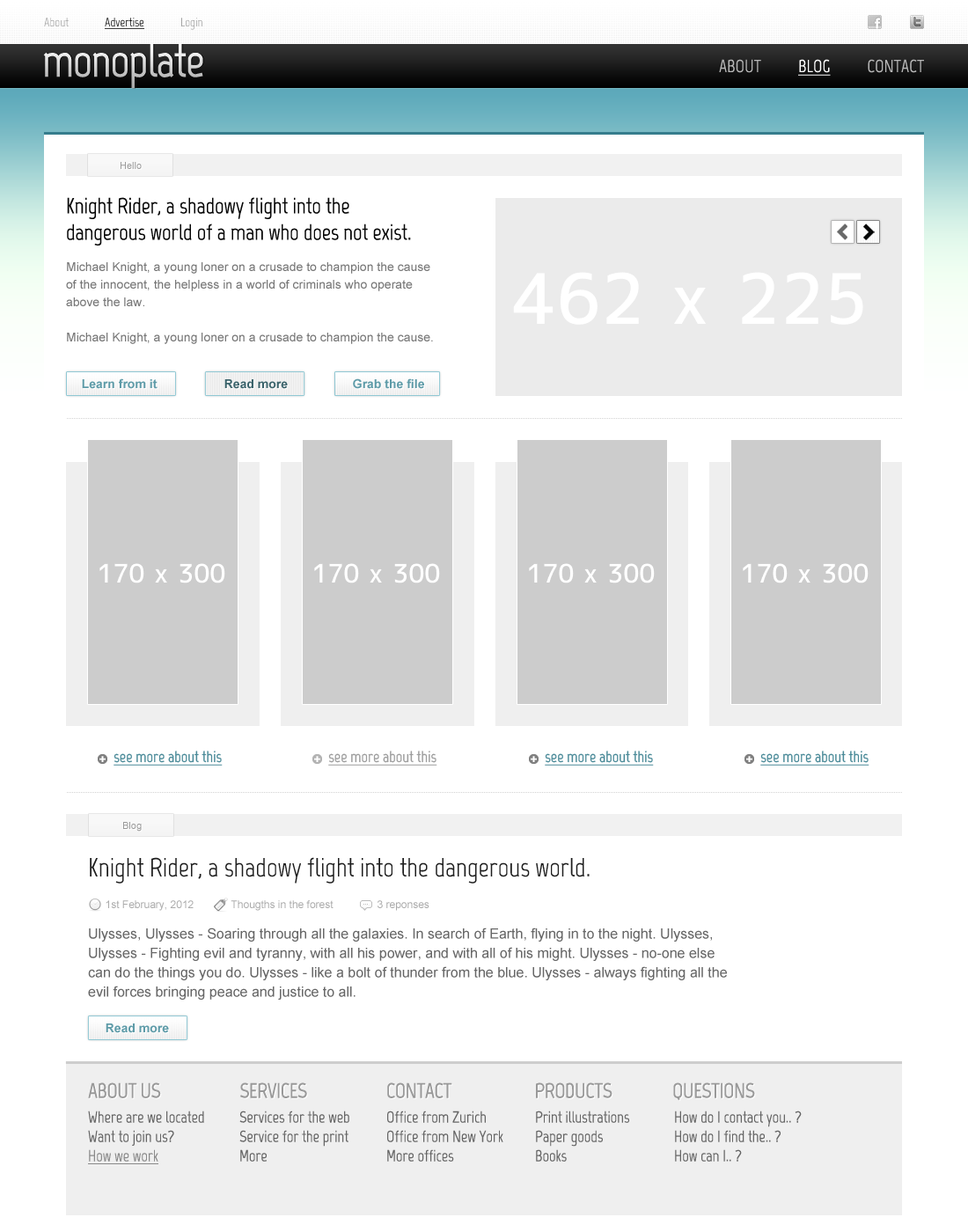
<style>
.page{position:relative;width:968px;height:1232px;background:#ffffff}
.page>*{position:absolute;margin:0}
.t1{font:12.3px "Marvel-Regular";color:#000000;text-decoration:underline}
.t2{font:12.3px "Marvel-Regular";color:#a0a0a0}
.t3{font:46.9px "Marvel-Bold";letter-spacing:-0.025em}
.t4{font:17.6px "Marvel-Regular";color:#b9b9b9;text-transform:uppercase}
.t5{font:17.6px "Marvel-Regular";color:#ffffff;text-transform:uppercase;text-decoration:underline}
.t6{font:9.7px "ArialMT";color:#999999}
.t7{font:22px/26.4px "Marvel-Regular";color:#050505}
.t8{font:12.3px/17.6px "ArialMT";color:#777777}
.t9{font:12.3px "Arial-BoldMT";color:#5e9ba8}
.t10{font:12.3px "Arial-BoldMT";color:#3b636b}
.t11{font:15.8px "Marvel-Bold";color:#367d8d;text-decoration:underline}
.t12{font:15.8px "Marvel-Bold";color:#929292;text-decoration:underline}
.t13{font:26.4px "Marvel-Regular";color:#1d1d1d}
.t14{font:10.6px "ArialMT";color:#aaaaaa}
.t15{font:14.1px/19.4px "ArialMT";color:#676767}
.t16{font:21.1px "Marvel-Bold";letter-spacing:-0.025em;color:#999999}
.t17{font:15.8px/19.4px "Marvel-Regular";color:#656565}
.t18{font:15.8px/19.4px "Marvel-Regular";color:#898989;text-decoration:underline}
</style>
<div class="page">
<p class="t1" style="left:44px;top:18px;width:158px;height:12px"><span class="t2">About              </span>Advertise<span class="t2">              Login</span></p>
<p class="t3" style="left:43px;top:44px;width:160px;height:45px">monoplate</p>
<p class="t4" style="left:719px;top:59px;width:205px;height:17px">About          <span class="t5">BLOG</span>          CONTACT</p>
<p class="t6" style="left:121px;top:162px;width:21px;height:7px">Hello</p>
<p class="t7" style="left:67px;top:197px;width:344px;height:49px">Knight Rider, a shadowy flight into the<br>dangerous world of a man who does not exist.</p>
<p class="t8" style="left:66px;top:262px;width:367px;height:82px">Michael Knight, a young loner on a crusade to champion the cause of the innocent, the helpless in a world of criminals who operate above the law.<br><br>Michael Knight, a young loner on a crusade to champion the cause.</p>
<p class="t9" style="left:82px;top:378px;width:76px;height:11px">Learn from it</p>
<p class="t10" style="left:224px;top:379px;width:64px;height:10px">Read more</p>
<p class="t9" style="left:353px;top:378px;width:71px;height:11px">Grab the file</p>
<p class="t11" style="left:114px;top:751px;width:109px;height:15px;opacity:0.9">see more about this</p>
<p class="t12" style="left:328px;top:751px;width:109px;height:15px;opacity:0.9">see more about this</p>
<p class="t11" style="left:545px;top:751px;width:109px;height:15px;opacity:0.9">see more about this</p>
<p class="t11" style="left:760px;top:751px;width:109px;height:15px;opacity:0.9">see more about this</p>
<p class="t6" style="left:123px;top:822px;width:19px;height:10px">Blog</p>
<p class="t13" style="left:90px;top:857px;width:500px;height:26px">Knight Rider, a shadowy flight into the dangerous world.</p>
<p class="t14" style="left:106px;top:900px;width:88px;height:11px">1st February, 2012</p>
<p class="t14" style="left:231px;top:900px;width:102px;height:11px">Thougths in the forest</p>
<p class="t14" style="left:377px;top:900px;width:52px;height:11px">3 reponses</p>
<p class="t15" style="left:88px;top:927px;width:639px;height:73px">Ulysses, Ulysses - Soaring through all the galaxies. In search of Earth, flying in to the night. Ulysses, Ulysses - Fighting evil and tyranny, with all his power, and with all of his might. Ulysses - no-one else can do the things you do. Ulysses - like a bolt of thunder from the blue. Ulysses - always fighting all the evil forces bringing peace and justice to all.</p>
<p class="t9" style="left:106px;top:1023px;width:63px;height:10px">Read more</p>
<p class="t16" style="left:88px;top:1082px;width:667px;height:19px">ABOUT US                     SERVICES                     CONTACT                      PRODUCTS                QUESTIONS</p>
<p class="t17" style="left:88px;top:1110px;width:116px;height:54px">Where are we located<br>Want to join us?<br><span class="t18">How we work</span></p>
<p class="t17" style="left:239px;top:1110px;width:110px;height:52px">Services for the web<br>Service for the print<br>More</p>
<p class="t17" style="left:387px;top:1110px;width:116px;height:52px">Office from Zurich<br>Office from New York<br>More offices</p>
<p class="t17" style="left:536px;top:1110px;width:94px;height:52px">Print illustrations<br>Paper goods<br>Books</p>
<p class="t17" style="left:675px;top:1110px;width:127px;height:52px">How do I contact you.. ?<br>How do I find the.. ?<br>How can I.. ?</p>
</div>
